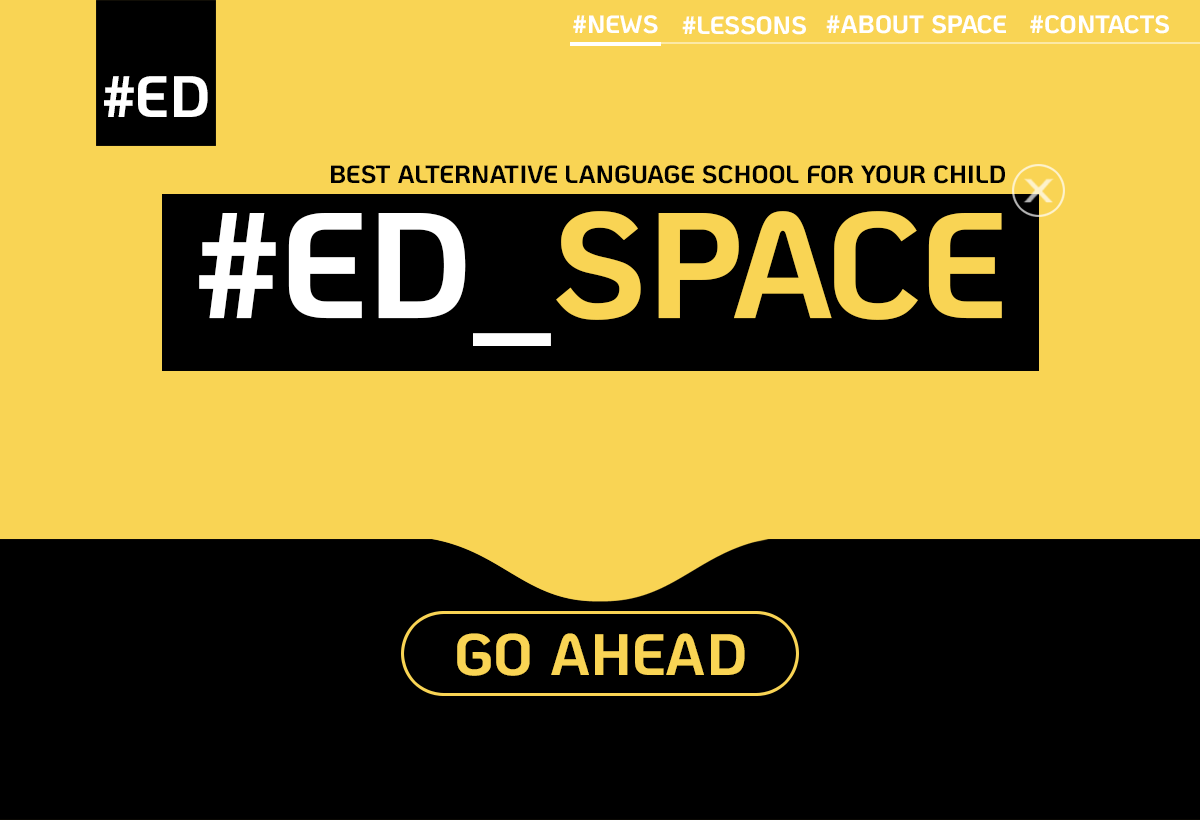
<style>
.page{position:relative;width:1200px;height:820px;background:#f9d454}
.page>*{position:absolute;margin:0}
.t1{font:25px "KoHo-Bold";color:#ffffff}
.t2{font:58.3px "KoHo-Bold";color:#ffffff}
.t3{font:25px "KoHo-Bold";color:#000000}
.t4{font:150px "KoHo-Bold";color:#f9d454}
.t5{font:150px "KoHo-Bold";color:#ffffff}
.t6{font:58.3px "KoHo-Bold";color:#f9d454}
</style>
<div class="page">
<p class="t1" style="left:573px;top:15px;width:85px;height:19px">#NEWS</p>
<p class="t1" style="left:682px;top:16px;width:124px;height:19px">#LESSONS</p>
<p class="t1" style="left:826px;top:15px;width:180px;height:19px">#ABOUT SPACE</p>
<p class="t1" style="left:1030px;top:15px;width:139px;height:19px">#CONTACTS</p>
<p class="t2" style="left:104px;top:76px;width:104px;height:41px">#ED</p>
<p class="t3" style="left:331px;top:165px;width:674px;height:19px">BEST ALTERNATIVE LANGUAGE SCHOOL FOR YOUR CHILD</p>
<p class="t4" style="left:199px;top:211px;width:803px;height:135px"><span class="t5">#ED_</span>SPACE</p>
<p class="t6" style="left:457px;top:633px;width:288px;height:43px">GO AHEAD</p>
</div>
